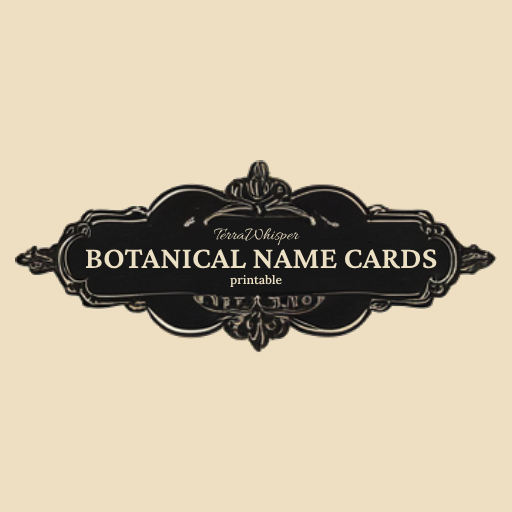
<style>
.page{position:relative;width:512px;height:512px;background:#eedfc3}
.page>*{position:absolute;margin:0}
.t1{font:18px "Allura-Regular";color:#ece0c4}
.t2{font:32px "CrimsonPro-SemiBold";color:#ece0c4;text-transform:uppercase}
.t3{font:12px "Lora-SemiBold";color:#ece0c4}
</style>
<div class="page">
<p class="t1" style="left:213px;top:228px;width:87px;height:18px">TerraWhisper</p>
<p class="t2" style="left:85px;top:249px;width:352px;height:20px">Botanical Name Cards</p>
<p class="t3" style="left:230px;top:274px;width:52px;height:14px">printable</p>
</div>
